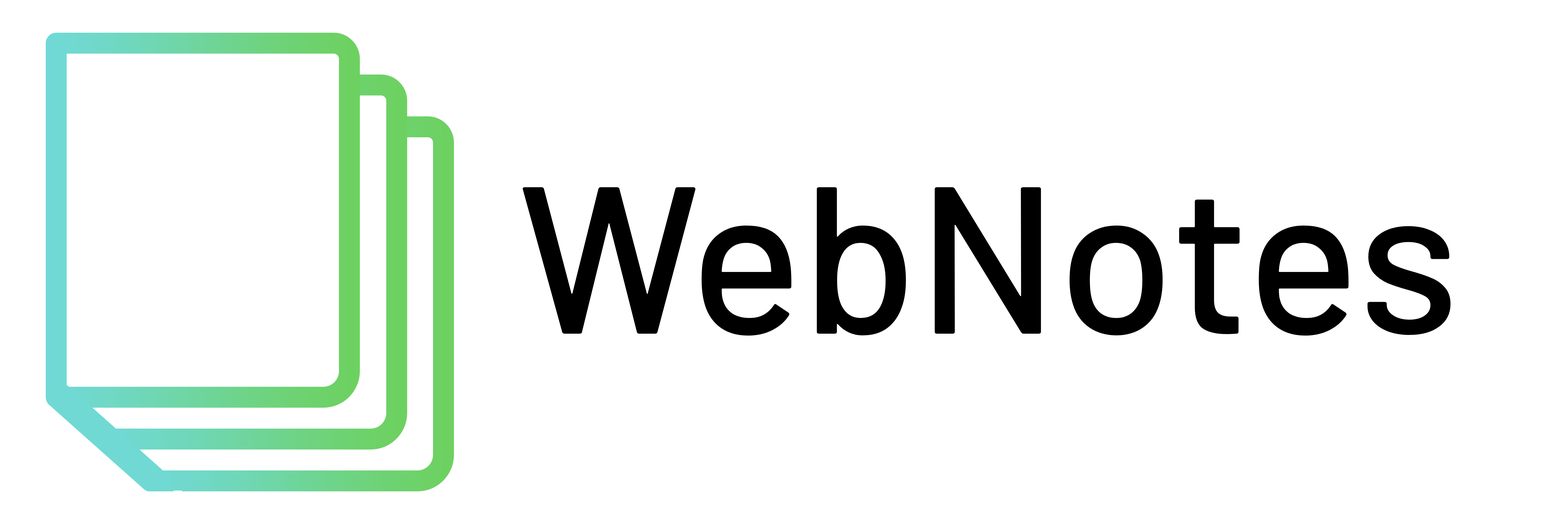
<style>
.page{position:relative;width:1568px;height:523px;background:#ffffff}
.page>*{position:absolute;margin:0}
.t1{font:209.1px "Barlow-Medium";color:#000000}
</style>
<div class="page">
<p class="t1" style="left:523px;top:187px;width:928px;height:149px">WebNotes</p>
</div>
